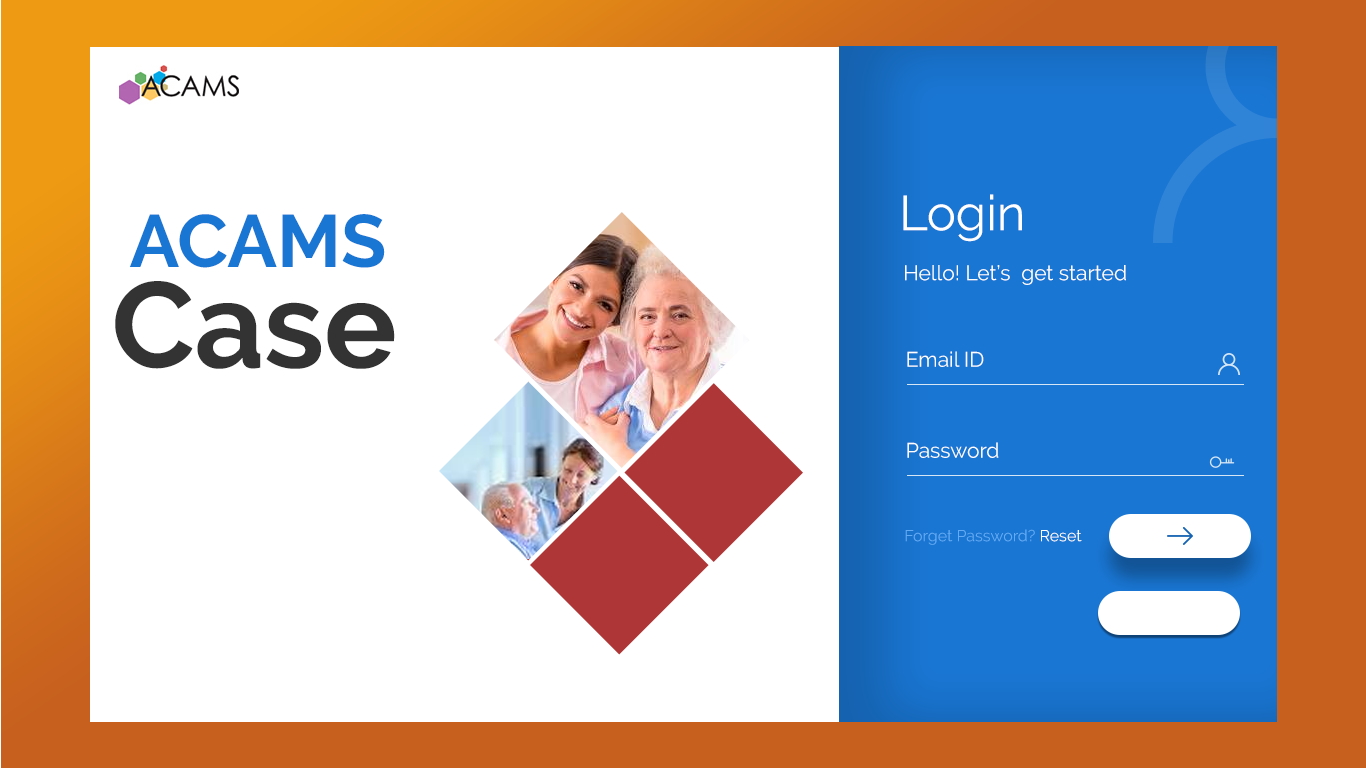
<style>
.page{position:relative;width:1366px;height:768px;background:#ffffff}
.page>*{position:absolute;margin:0}
.t1{font:49px "Raleway-Regular";color:#ffffff}
.t2{font:74px "Raleway-Bold";color:#1976d3}
.t3{font:21px "Raleway-Regular";color:#ffffff}
.t4{font:121px "Raleway-Bold";color:#333333}
.t5{font:16px "Raleway-Regular";color:#63abf4}
.t6{font:16px "Raleway-Regular";color:#ffffff}
</style>
<div class="page">
<p class="t1" style="left:903px;top:194px;width:119px;height:48px">Login</p>
<p class="t2" style="left:129px;top:214px;width:256px;height:54px">ACAMS</p>
<p class="t3" style="left:905px;top:265px;width:221px;height:20px">Hello! Let’s  get started</p>
<p class="t4" style="left:115px;top:281px;width:280px;height:88px">Case</p>
<p class="t3" style="left:907px;top:351px;width:77px;height:16px">Email ID</p>
<p class="t3" style="left:907px;top:442px;width:92px;height:16px">Password</p>
<p class="t5" style="left:905px;top:529px;width:177px;height:16px">Forget Password? <span class="t6">Reset</span></p>
</div>
